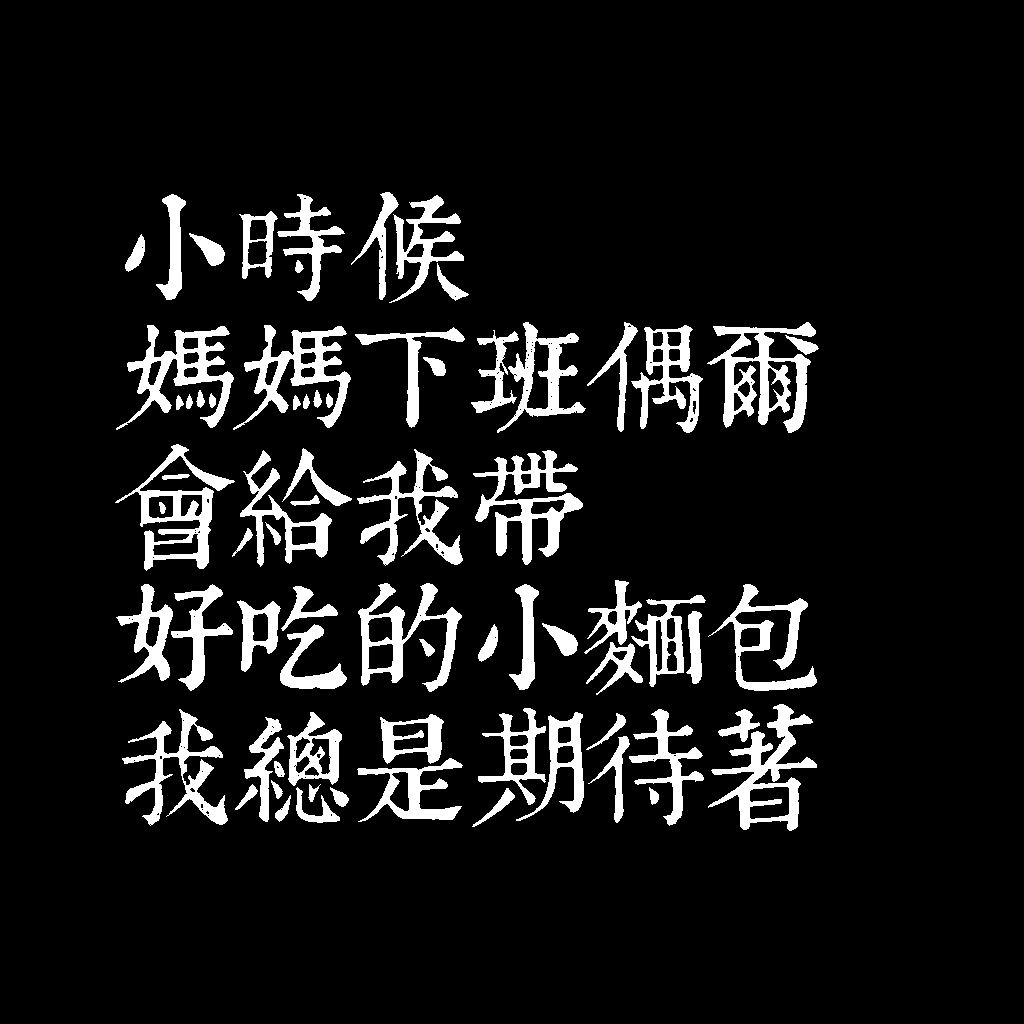
<style>
.page{position:relative;width:1024px;height:1024px;background:#000000}
.page>*{position:absolute;margin:0}
.t1{font:120px/130px "TpldKhangXiDictTrial";letter-spacing:-0.02em;color:#ffffff}
</style>
<div class="page">
<p class="t1" style="left:115px;top:192px;width:704px;height:639px">小時候<br>媽媽下班偶爾<br>會給我帶<br>好吃的小麵包<br>我總是期待著</p>
</div>
